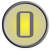
<style>
.page{position:relative;width:50px;height:50px;background:#ffffff}
.page>*{position:absolute;margin:0}
.t1{font:30px "TVpl";letter-spacing:0.05em;color:#6a6a6a}
</style>
<div class="page">
<p class="t1" style="left:16px;top:11px;width:18px;height:27px">O</p>
</div>
